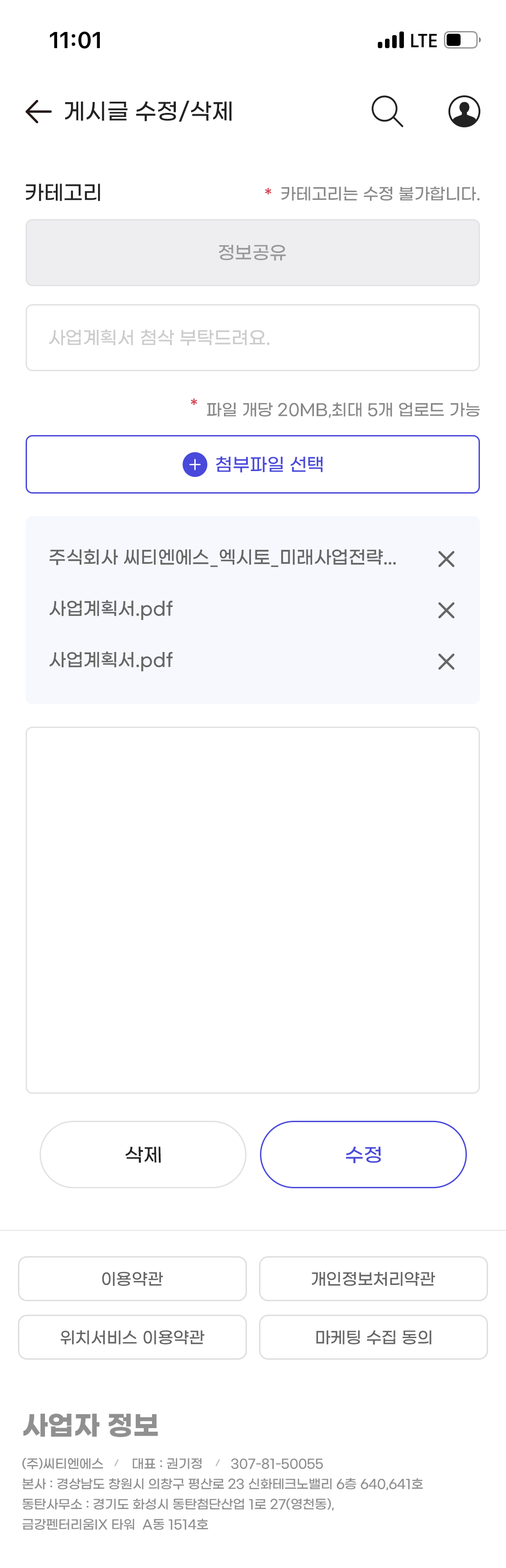
<style>
.page{position:relative;width:506px;height:1568px;background:#ffffff}
.page>*{position:absolute;margin:0}
.t1{font:22.5px "GmarketSansMedium";color:#222222}
.t2{font:20.2px "GmarketSansMedium";color:#222222}
.t3{font:18px "GmarketSansMedium";color:#d43d4e}
.t4{font:16.2px "GmarketSansMedium";color:#888888}
.t5{font:18px "GmarketSansMedium";color:#999999}
.t6{font:18px "GmarketSansMedium";color:#cccccc}
.t7{font:18px "GmarketSansMedium";color:#4949db}
.t8{font:18px "GmarketSansMedium";color:#666666}
.t9{font:18.9px "GmarketSansMedium";color:#222222;scale:1.04 1}
.t10{font:18.9px "GmarketSansMedium";color:#4949db;scale:1.04 1}
.t11{font:16.2px "GmarketSansMedium";color:#666666}
.t12{font:27px "GmarketSansBold";color:#909090}
.t13{font:12.6px/20.2px "GmarketSansMedium";color:#909090}
</style>
<div class="page">
<p class="t1" style="left:65px;top:100px;width:167px;height:22px">게시글 수정/삭제</p>
<p class="t2" style="left:26px;top:184px;width:74px;height:17px">카테고리</p>
<p class="t3" style="left:265px;top:188px;width:7px;height:7px">*</p>
<p class="t4" style="left:282px;top:186px;width:198px;height:15px">카테고리는 수정 불가합니다.</p>
<p class="t5" style="left:219px;top:245px;width:67px;height:16px">정보공유</p>
<p class="t6" style="left:49px;top:329px;width:221px;height:17px">사업계획서 첨삭 부탁드려요.</p>
<p class="t3" style="left:191px;top:398px;width:7px;height:7px">*</p>
<p class="t4" style="left:207px;top:402px;width:273px;height:16px">파일 개당 20MB,최대 5개 업로드 가능</p>
<p class="t7" style="left:216px;top:456px;width:107px;height:16px">첨부파일 선택</p>
<p class="t8" style="left:49px;top:549px;width:347px;height:18px">주식회사 씨티엔에스_엑시토_미래사업전략...</p>
<p class="t8" style="left:49px;top:600px;width:124px;height:20px">사업계획서.pdf</p>
<p class="t8" style="left:49px;top:651px;width:124px;height:20px">사업계획서.pdf</p>
<p class="t9" style="left:126px;top:1146px;width:35px;height:17px">삭제</p>
<p class="t10" style="left:346px;top:1146px;width:35px;height:18px">수정</p>
<p class="t11" style="left:102px;top:1271px;width:61px;height:15px">이용약관</p>
<p class="t11" style="left:312px;top:1271px;width:124px;height:15px">개인정보처리약관</p>
<p class="t11" style="left:61px;top:1330px;width:144px;height:14px">위치서비스 이용약관</p>
<p class="t11" style="left:316px;top:1330px;width:115px;height:15px">마케팅 수집 동의</p>
<p class="t12" style="left:23px;top:1414px;width:135px;height:23px">사업자 정보</p>
<p class="t13" style="left:22px;top:1458px;width:401px;height:72px">(주)씨티엔에스        대표 : 권기정        307-81-50055<br>본사 : 경상남도 창원시 의창구 평산로 23 신화테크노밸리 6층 640,641호<br>동탄사무소 : 경기도 화성시 동탄첨단산업 1로 27(영천동),<br>금강펜터리움IX 타워  A동 1514호</p>
</div>
